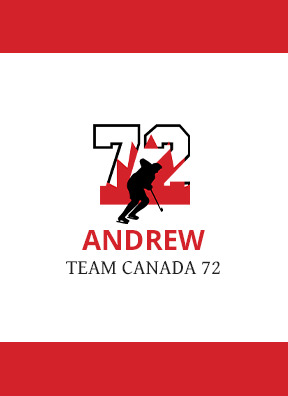
<style>
.page{position:relative;width:288px;height:396px;background:#ffffff}
.page>*{position:absolute;margin:0}
.t1{font:28px "OpenSans-Bold";color:#d4222a;text-transform:uppercase}
.t2{font:20.7px "GentiumBookBasic";color:#202020;text-transform:uppercase}
</style>
<div class="page">
<p class="t1" style="left:82px;top:230px;width:123px;height:20px">ANDREW</p>
<p class="t2" style="left:66px;top:260px;width:154px;height:15px">Team Canada 72</p>
</div>
